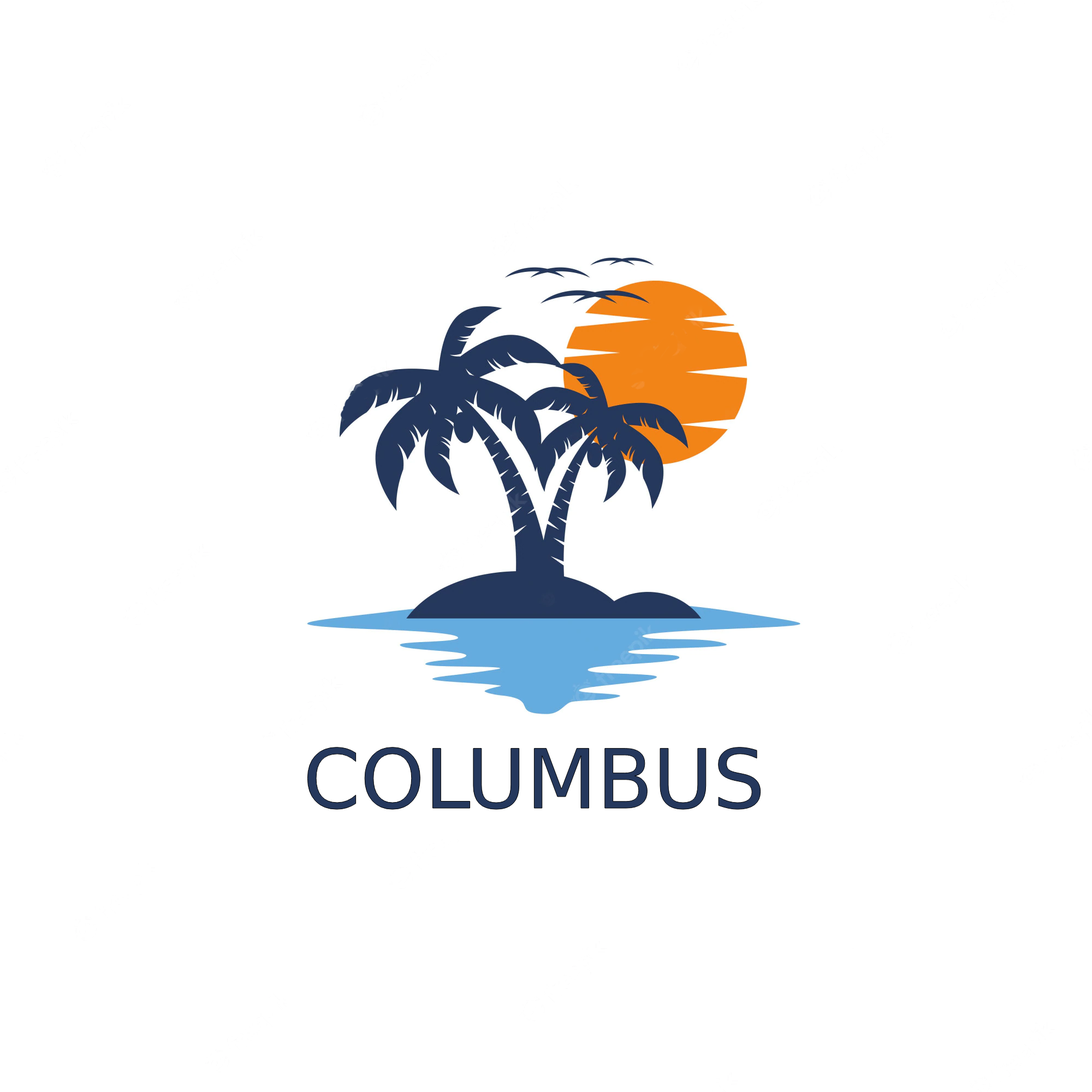
<style>
.page{position:relative;width:1092px;height:1092px;background:#ffffff}
.page>*{position:absolute;margin:0}
.t1{font:81.9px "DejaVuSans";color:#25385d}
</style>
<div class="page">
<p class="t1" style="left:307px;top:746px;width:454px;height:64px">COLUMBUS</p>
</div>
